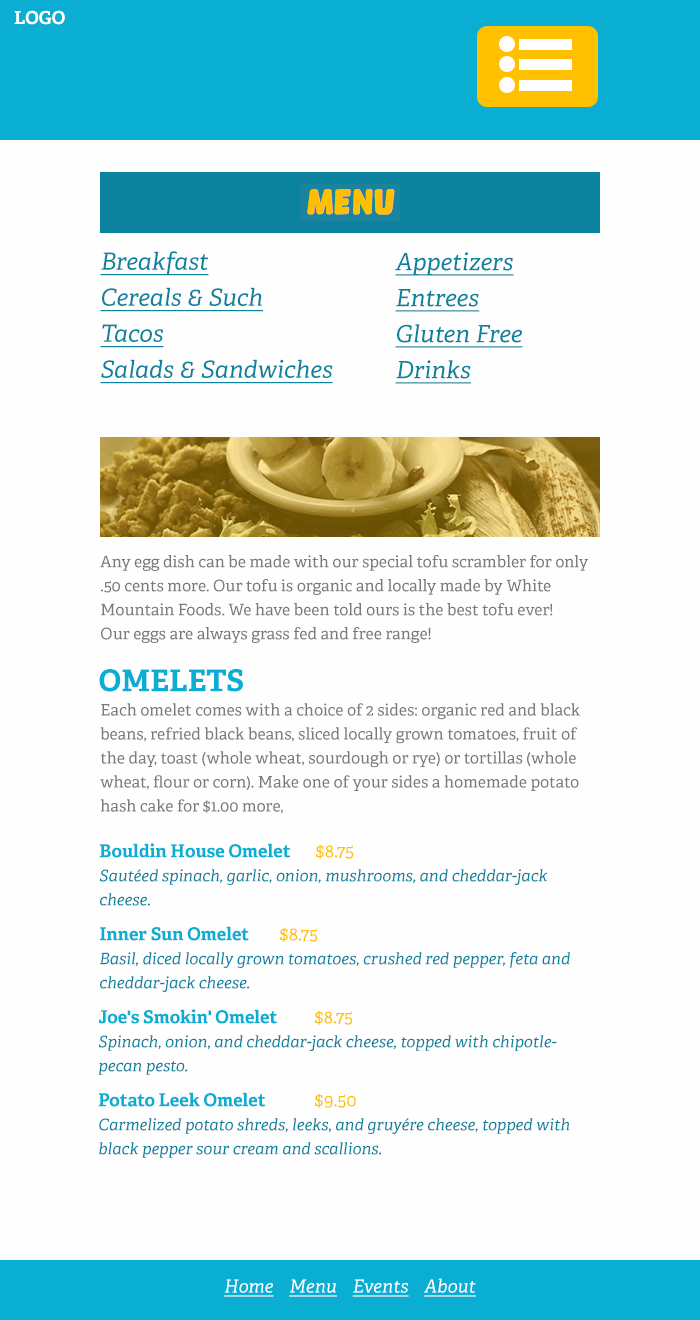
<style>
.page{position:relative;width:700px;height:1320px;background:#fefefe}
.page>*{position:absolute;margin:0}
.t1{font:18px "Adelle-Bold";color:#ffffff}
.t2{font:24px/36px "Adelle-Italic";color:#0c839e;text-decoration:underline}
.t3{font:16px/24px "Adelle-Regular";color:#767b7c}
.t4{font:30px "Adelle-Bold";color:#0aaed3}
.t5{font:16px/24px "Adelle-Italic";color:#0c839e}
.t6{font:18px/24px "Adelle-Bold";color:#0aaed3}
.t7{font:18px/24px "Adelle-Regular";color:#ffc000}
.t8{font:18px/24px "Adelle-Regular";color:#fcc000}
.t9{font:18px "Adelle-Italic";color:#ffffff;text-decoration:underline}
</style>
<div class="page">
<p class="t1" style="left:14px;top:10px;width:51px;height:15px">LOGO</p>
<p class="t2" style="left:100px;top:251px;width:233px;height:133px">Breakfast<br>Cereals &amp; Such<br>Tacos<br>Salads &amp; Sandwiches</p>
<p class="t2" style="left:395px;top:252px;width:128px;height:132px">Appetizers<br>Entrees<br>Gluten Free<br>Drinks</p>
<p class="t3" style="left:100px;top:555px;width:488px;height:88px">Any egg dish can be made with our special tofu scrambler for only .50 cents more. Our tofu is organic and locally made by White Mountain Foods. We have been told ours is the best tofu ever!<br>Our eggs are always grass fed and free range!</p>
<p class="t4" style="left:99px;top:669px;width:144px;height:23px">OMELETS</p>
<p class="t3" style="left:100px;top:703px;width:480px;height:111px">Each omelet comes with a choice of 2 sides: organic red and black beans, refried black beans, sliced locally grown tomatoes, fruit of the day, toast (whole wheat, sourdough or rye) or tortillas (whole wheat, flour or corn). Make one of your sides a homemade potato hash cake for $1.00 more,</p>
<p class="t5" style="left:99px;top:843px;width:449px;height:63px"><span class="t6">Bouldin House Omelet </span><span class="t7">$8.75<br></span>Sautéed spinach, garlic, onion, mushrooms, and cheddar-jack cheese.</p>
<p class="t5" style="left:99px;top:926px;width:471px;height:66px"><span class="t6">Inner Sun Omelet </span><span class="t7">$8.75<br></span>Basil, diced locally grown tomatoes, crushed red pepper, feta and cheddar-jack cheese.</p>
<p class="t5" style="left:99px;top:1009px;width:458px;height:66px"><span class="t6">Joe's Smokin' Omelet  </span><span class="t8">$8.75<br></span>Spinach, onion, and cheddar-jack cheese, topped with chipotle-<br>pecan pesto.</p>
<p class="t5" style="left:98px;top:1092px;width:472px;height:66px"><span class="t6">Potato Leek Omelet  </span><span class="t7">$9.50<br></span>Carmelized potato shreds, leeks, and gruyére cheese, topped with black pepper sour cream and scallions.</p>
<p class="t9" style="left:224px;top:1278px;width:252px;height:19px">Home    Menu    Events    About</p>
</div>
